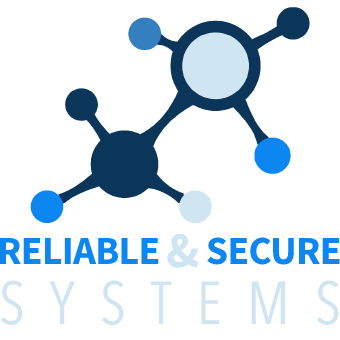
<style>
.page{position:relative;width:340px;height:340px;background:#ffffff}
.page>*{position:absolute;margin:0}
.t1{font:50px "Mada-Bold";letter-spacing:-0.02em;color:#d0e5f2}
.t2{font:40px "Mada-Bold";letter-spacing:-0.02em;color:#0c87f2}
.t3{font:60px "AvenirNextLTPro-Cn";letter-spacing:0.42em;color:#d0e5f2}
</style>
<div class="page">
<p class="t1" style="left:167px;top:233px;width:32px;height:35px">&amp;</p>
<p class="t2" style="left:0px;top:237px;width:159px;height:27px">RELIABLE</p>
<p class="t2" style="left:207px;top:237px;width:133px;height:28px">SECURE</p>
<p class="t3" style="left:1px;top:280px;width:338px;height:46px">SYSTEMS</p>
</div>
